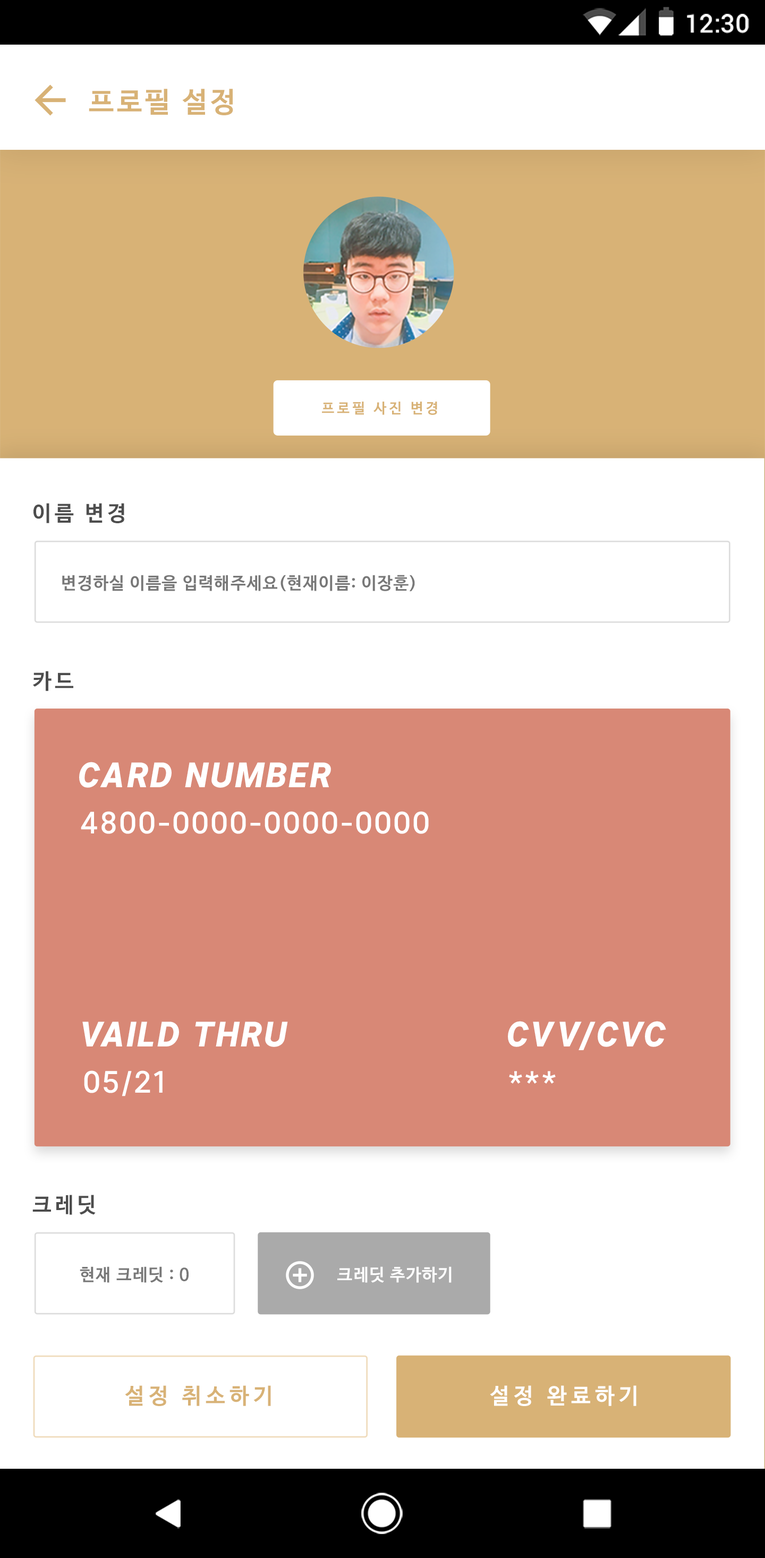
<style>
.page{position:relative;width:765px;height:1558px;background:#ffffff}
.page>*{position:absolute;margin:0}
.t1{font:25.5px "Roboto-Medium";color:#ffffff}
.t2{font:28.3px "NanumBarunGothicBold";letter-spacing:0.1em;color:#d8b276}
.t3{font:14.2px "NanumBarunGothicBold";letter-spacing:0.2em;color:#d8b276}
.t4{font:21.3px "NanumBarunGothicBold";letter-spacing:0.16em;color:#4d4d4d}
.t5{font:17px "NanumBarunGothicBold";letter-spacing:0.05em;color:#787878}
.t6{font:34px "InterUI-BlackItalic";letter-spacing:0.05em;color:#ffffff}
.t7{font:29.8px "InterUI-Medium";letter-spacing:0.05em;color:#ffffff}
.t8{font:17px "NanumBarunGothicBold";letter-spacing:0.05em;color:#ffffff}
.t9{font:22px "NanumBarunGothicBold";letter-spacing:0.2em;color:#d8b276}
.t10{font:22px "NanumBarunGothicBold";letter-spacing:0.2em;color:#ffffff}
</style>
<div class="page">
<p class="t1" style="left:687px;top:14px;width:62px;height:19px">12:30</p>
<p class="t2" style="left:89px;top:89px;width:144px;height:26px">프로필 설정</p>
<p class="t3" style="left:322px;top:402px;width:115px;height:13px">프로필 사진 변경</p>
<p class="t4" style="left:33px;top:503px;width:91px;height:20px">이름 변경</p>
<p class="t5" style="left:62px;top:575px;width:353px;height:16px">변경하실 이름을 입력해주세요(현재이름: 이장훈)</p>
<p class="t4" style="left:33px;top:671px;width:40px;height:20px">카드</p>
<p class="t6" style="left:79px;top:762px;width:252px;height:26px">CARD NUMBER</p>
<p class="t7" style="left:81px;top:811px;width:348px;height:23px">4800-0000-0000-0000</p>
<p class="t6" style="left:82px;top:1022px;width:206px;height:25px">VAILD THRU</p>
<p class="t6" style="left:508px;top:1021px;width:158px;height:29px">CVV/CVC</p>
<p class="t7" style="left:84px;top:1071px;width:79px;height:26px">05/21</p>
<p class="t7" style="left:509px;top:1071px;width:47px;height:13px">***</p>
<p class="t4" style="left:32px;top:1195px;width:64px;height:20px">크레딧</p>
<p class="t5" style="left:80px;top:1267px;width:109px;height:16px">현재 크레딧 : 0</p>
<p class="t8" style="left:337px;top:1267px;width:115px;height:16px">크레딧 추가하기</p>
<p class="t9" style="left:125px;top:1386px;width:146px;height:20px">설정 취소하기</p>
<p class="t10" style="left:490px;top:1386px;width:147px;height:20px">설정 완료하기</p>
</div>
